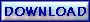
<style>
.page{position:relative;width:90px;height:22px}
.page>*{position:absolute;margin:0}
.t1{font:14px "StylusBT";color:#0000a1;font-weight:bold}
</style>
<div class="page">
<p class="t1" style="left:5px;top:7px;width:81px;height:9px">DOWNLOAD</p>
</div>
